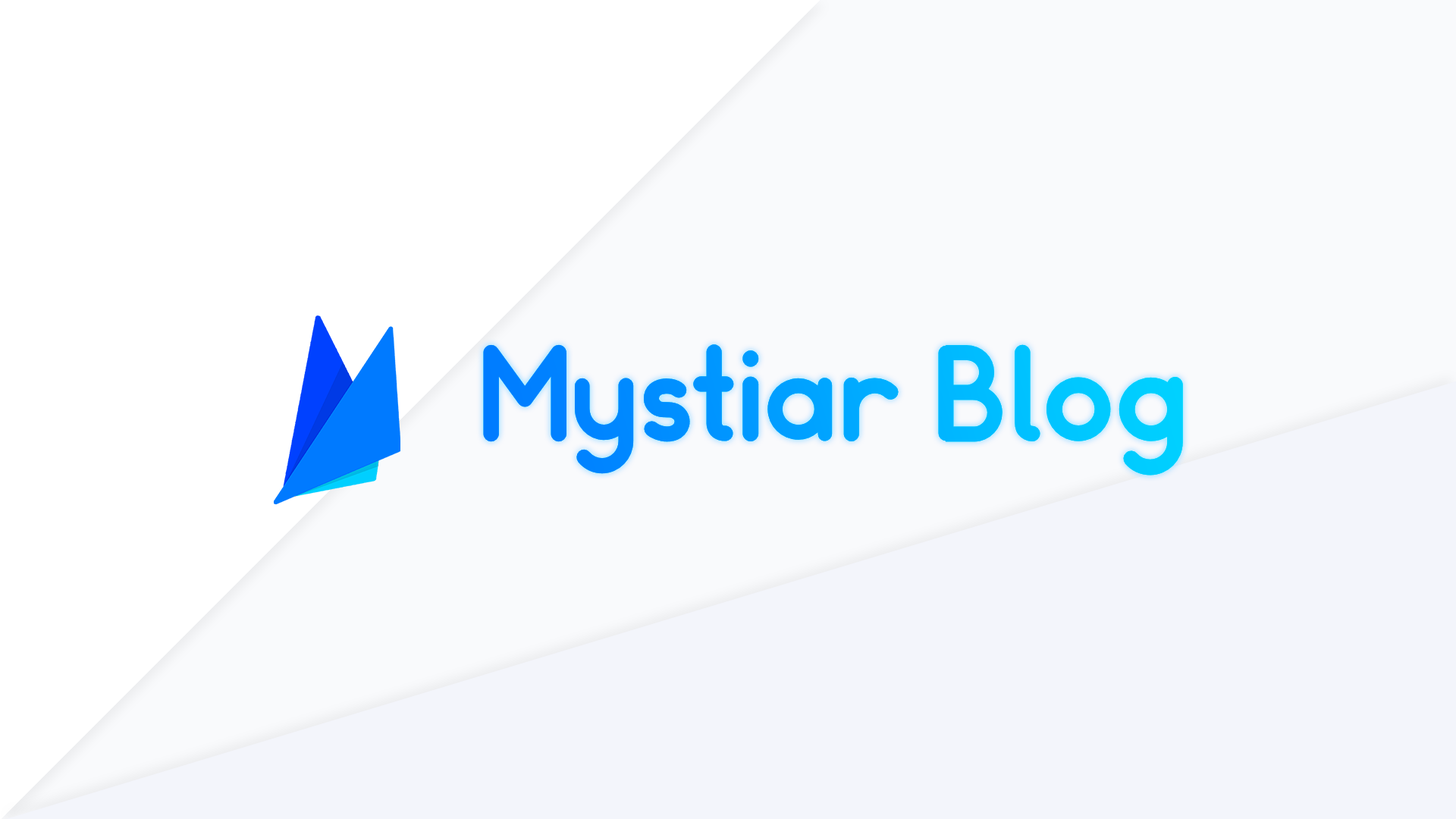
<style>
.page{position:relative;width:1456px;height:819px;background:#f9fafc}
.page>*{position:absolute;margin:0}
.t1{font:127.1px "Somatic-Rounded"}
</style>
<div class="page">
<p class="t1" style="left:483px;top:344px;width:700px;height:131px">Mystiar Blog</p>
</div>
